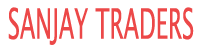
<style>
.page{position:relative;width:202px;height:50px;background:#ffffff}
.page>*{position:absolute;margin:0}
.t1{font:42.2px "LucidaSansUnicode";color:#ec4848;scale:0.53 1}
</style>
<div class="page">
<p class="t1" style="left:8px;top:7px;width:186px;height:38px">SANJAY TRADERS</p>
</div>
